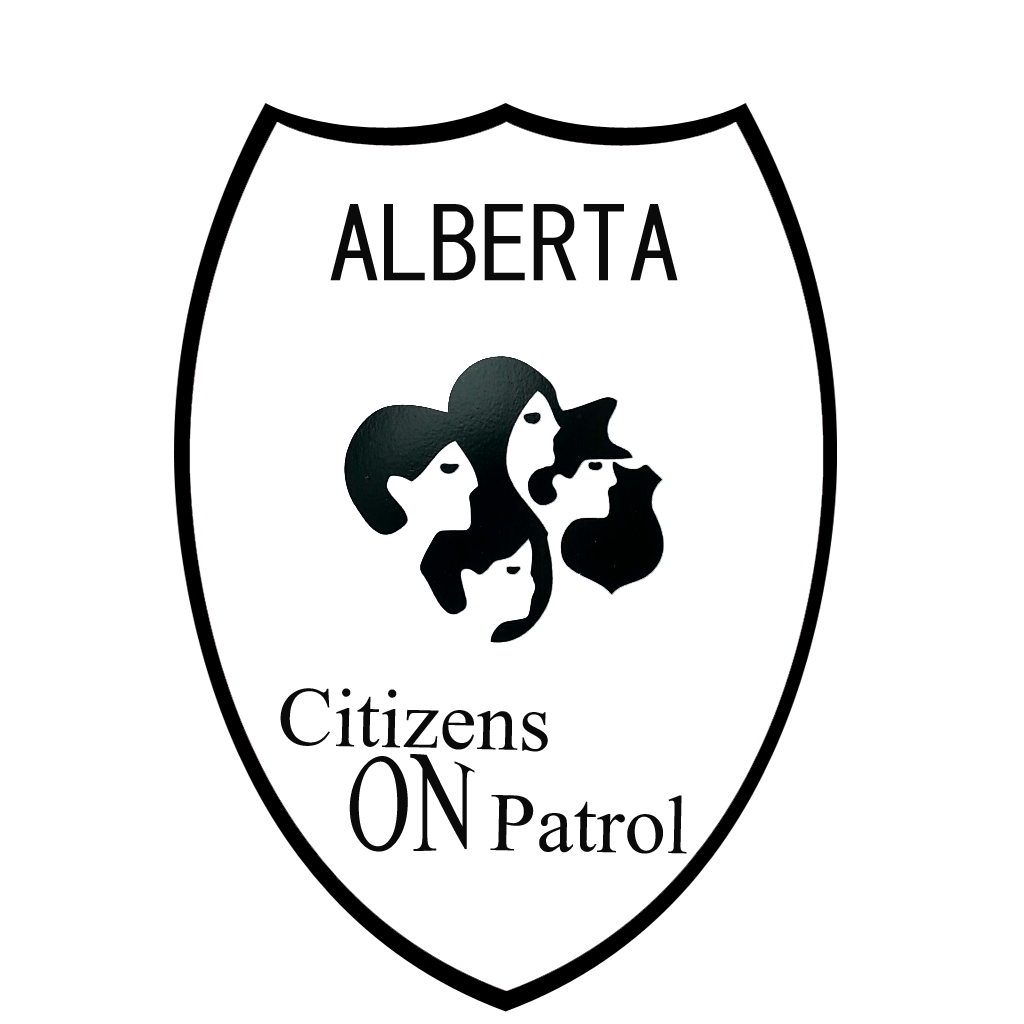
<style>
.page{position:relative;width:1024px;height:1024px;background:#ffffff}
.page>*{position:absolute;margin:0}
.t1{font:100px "MS-Gothic";color:#0a0a0a}
.t2{font:83.3px "TimesNewRomanPSMT";color:#0a0a0a}
</style>
<div class="page">
<p class="t1" style="left:330px;top:204px;width:348px;height:77px">ALBERTA</p>
<p class="t2" style="left:280px;top:688px;width:268px;height:64px;rotate:1deg">Citizens</p>
<p class="t2" style="left:349px;top:754px;width:126px;height:98px">ON</p>
<p class="t2" style="left:490px;top:795px;width:197px;height:59px;rotate:1deg">Patrol</p>
</div>
